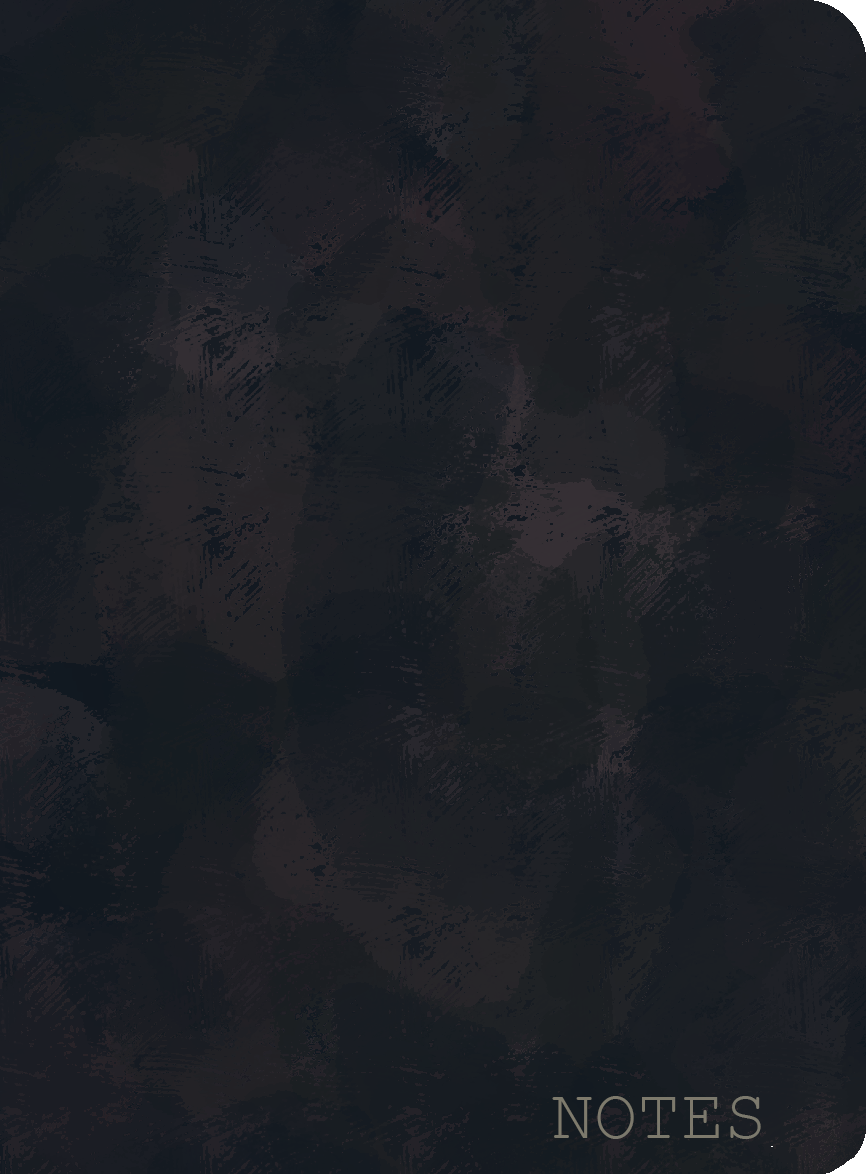
<style>
.page{position:relative;width:866px;height:1174px}
.page>*{position:absolute;margin:0}
.t1{font:72px "CourierNewPSMT";color:#7d7a6c}
</style>
<div class="page">
<p class="t1" style="left:552px;top:1096px;width:209px;height:43px">NOTES</p>
</div>
